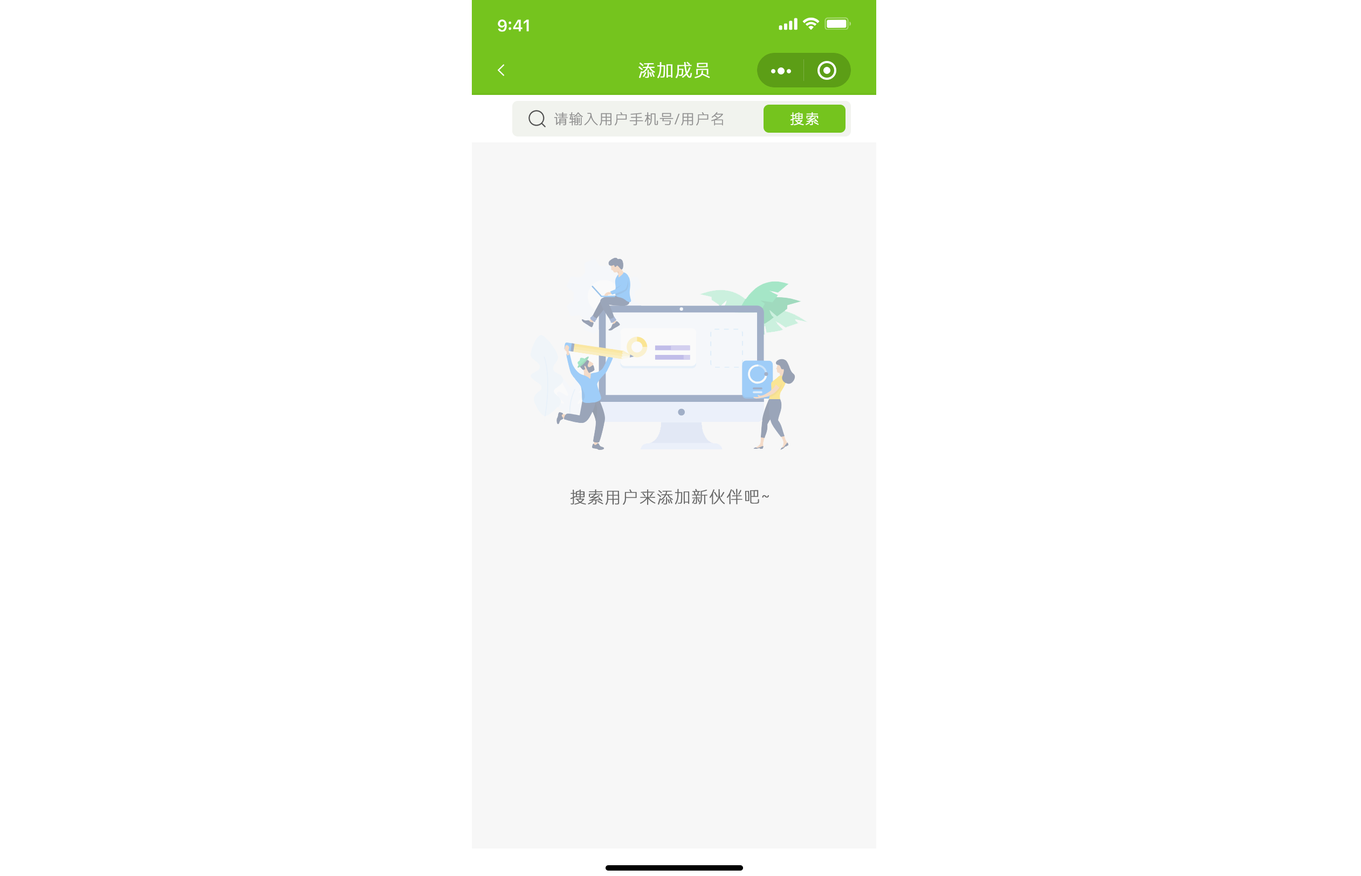
<style>
.page{position:relative;width:1361px;height:876px;background:#ffffff}
.page>*{position:absolute;margin:0}
.t1{font:17.3px "HarmonyOS_Sans_SC_Light";letter-spacing:0.04em;color:#ffffff;text-transform:uppercase;font-weight:bold}
.t2{font:14px "HarmonyOS_Sans_SC_Thin";letter-spacing:0.04em;color:#8f8f8f;text-transform:uppercase;font-weight:bold}
.t3{font:14px "HarmonyOS_Sans_SC_Light";letter-spacing:0.04em;color:#ffffff;text-transform:uppercase;font-weight:bold}
.t4{font:16.2px "HarmonyOS_Sans_SC_Thin";letter-spacing:0.04em;color:#666666;text-transform:uppercase;font-weight:bold}
</style>
<div class="page">
<p class="t1" style="left:639px;top:61px;width:71px;height:17px">添加成员</p>
<p class="t2" style="left:554px;top:112px;width:169px;height:14px">请输入用户手机号/用户名</p>
<p class="t3" style="left:790px;top:112px;width:29px;height:14px">搜索</p>
<p class="t4" style="left:570px;top:489px;width:199px;height:16px">搜索用户来添加新伙伴吧~</p>
</div>
